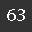
<style>
.page{position:relative;width:32px;height:32px;background:#333333}
.page>*{position:absolute;margin:0}
.t1{font:17.8px "MyriadPro-Regular";color:#ffffff;scale:1.12 1}
</style>
<div class="page">
<p class="t1" style="left:7px;top:9px;width:18px;height:12px">63</p>
</div>
